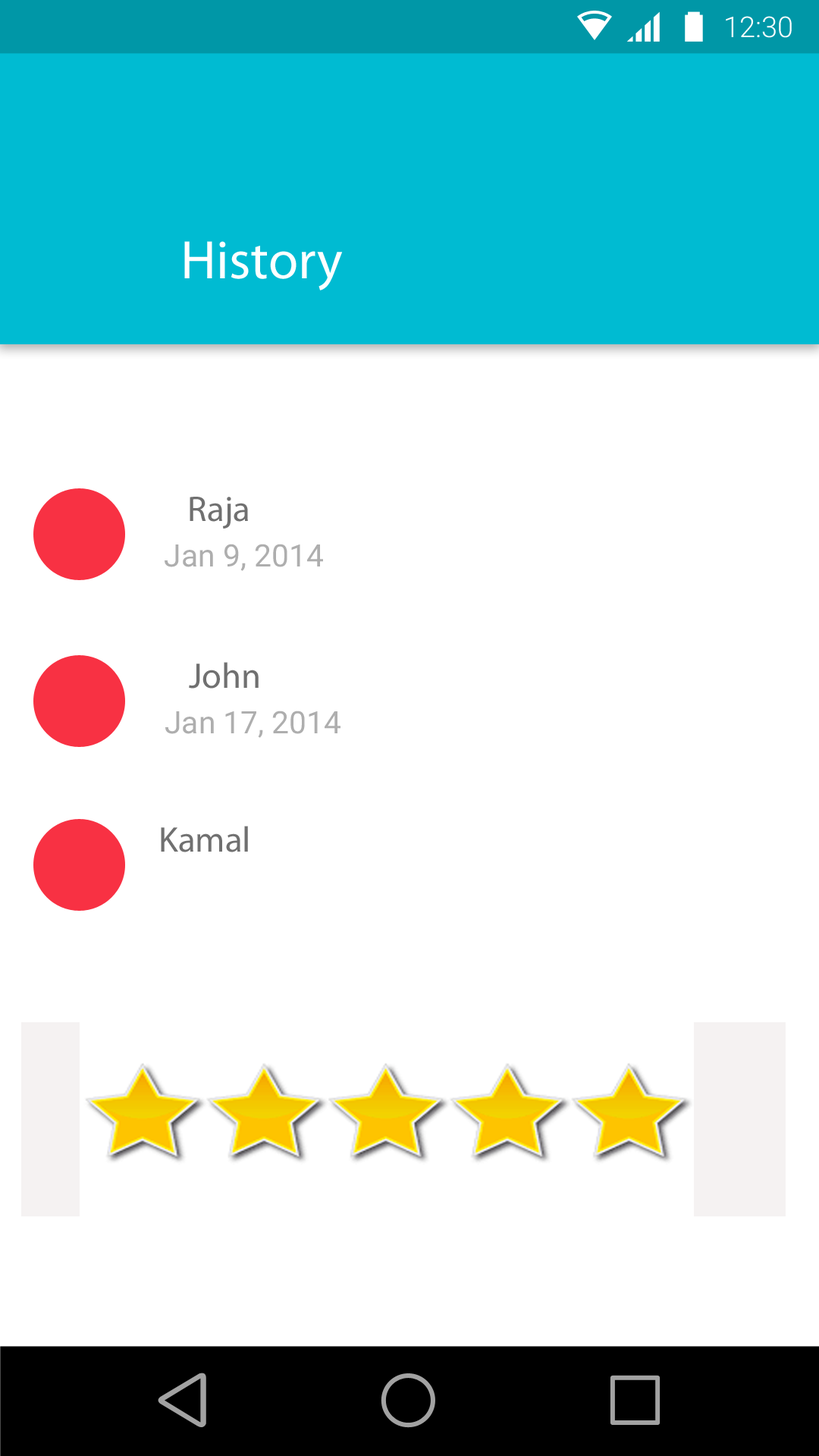
<style>
.page{position:relative;width:819px;height:1456px;background:#ffffff}
.page>*{position:absolute;margin:0}
.t1{font:28.8px "Roboto-Light";color:#ffffff}
.t2{font:54.5px "MyriadPro-Regular";color:#ffffff}
.t3{font:35.7px "MyriadPro-Regular";color:#707070}
.t4{font:31px "Roboto-Regular";color:#aeaeae}
</style>
<div class="page">
<p class="t1" style="left:726px;top:16px;width:66px;height:22px">12:30</p>
<p class="t2" style="left:184px;top:241px;width:159px;height:49px">History</p>
<p class="t3" style="left:190px;top:497px;width:58px;height:32px">Raja</p>
<p class="t4" style="left:165px;top:544px;width:158px;height:27px">Jan 9, 2014</p>
<p class="t3" style="left:189px;top:662px;width:70px;height:27px">John</p>
<p class="t4" style="left:165px;top:711px;width:175px;height:27px">Jan 17, 2014</p>
<p class="t3" style="left:161px;top:826px;width:87px;height:26px">Kamal</p>
</div>
